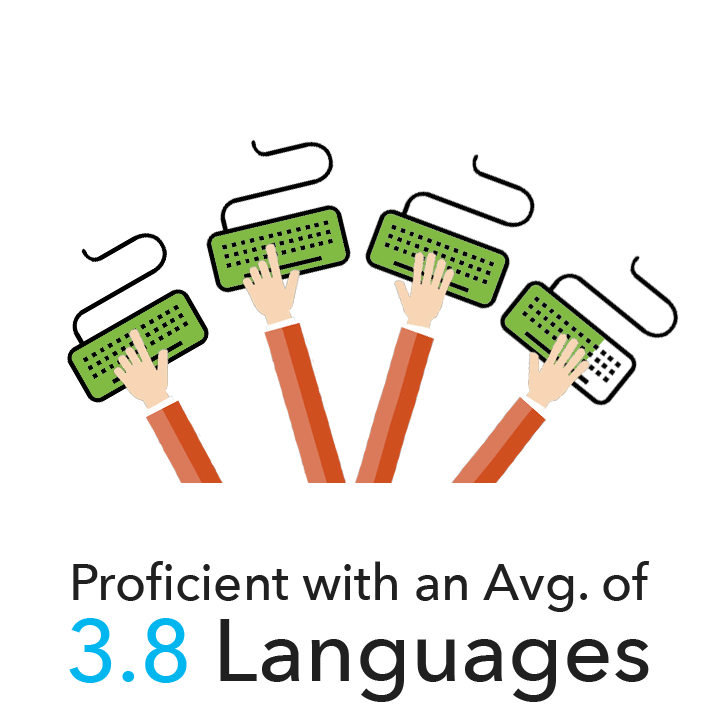
<style>
.page{position:relative;width:720px;height:720px;background:#ffffff}
.page>*{position:absolute;margin:0}
.t1{font:51px "AvenirNext-Medium";color:#202020}
.t2{font:87px "AvenirNext-Medium";color:#202020}
.t3{font:87px "AvenirNext-Medium";color:#00b6ef}
</style>
<div class="page">
<p class="t1" style="left:73px;top:561px;width:577px;height:51px">Proficient with an Avg. of</p>
<p class="t2" style="left:69px;top:618px;width:580px;height:84px"><span class="t3">3.8 </span>Languages</p>
</div>
